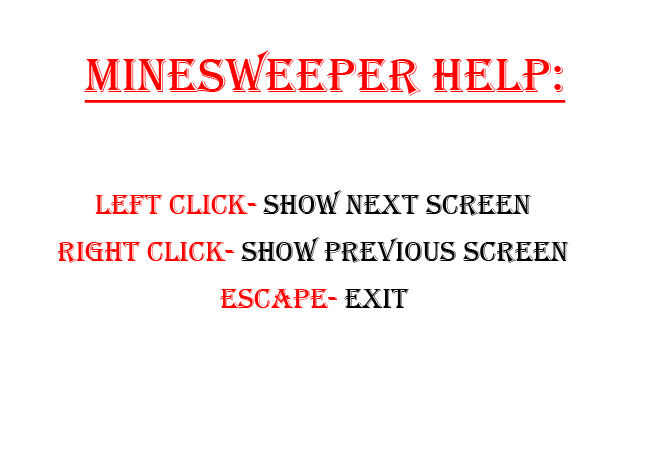
<style>
.page{position:relative;width:650px;height:450px;background:#ffffff}
.page>*{position:absolute;margin:0}
.t1{font:50px "Algerian";color:#ff0000;text-decoration:underline}
.t2{font:29px "Algerian";color:#000000}
.t3{font:29px "Algerian";color:#ff0000}
</style>
<div class="page">
<p class="t1" style="left:84px;top:50px;width:482px;height:53px">Minesweeper help:</p>
<p class="t2" style="left:95px;top:190px;width:436px;height:26px"><span class="t3">Left click- </span>show next Screen</p>
<p class="t2" style="left:58px;top:237px;width:511px;height:26px"><span class="t3">Right click- </span>show previous Screen</p>
<p class="t3" style="left:220px;top:289px;width:189px;height:19px">escape-<span class="t2"> exit</span></p>
</div>
